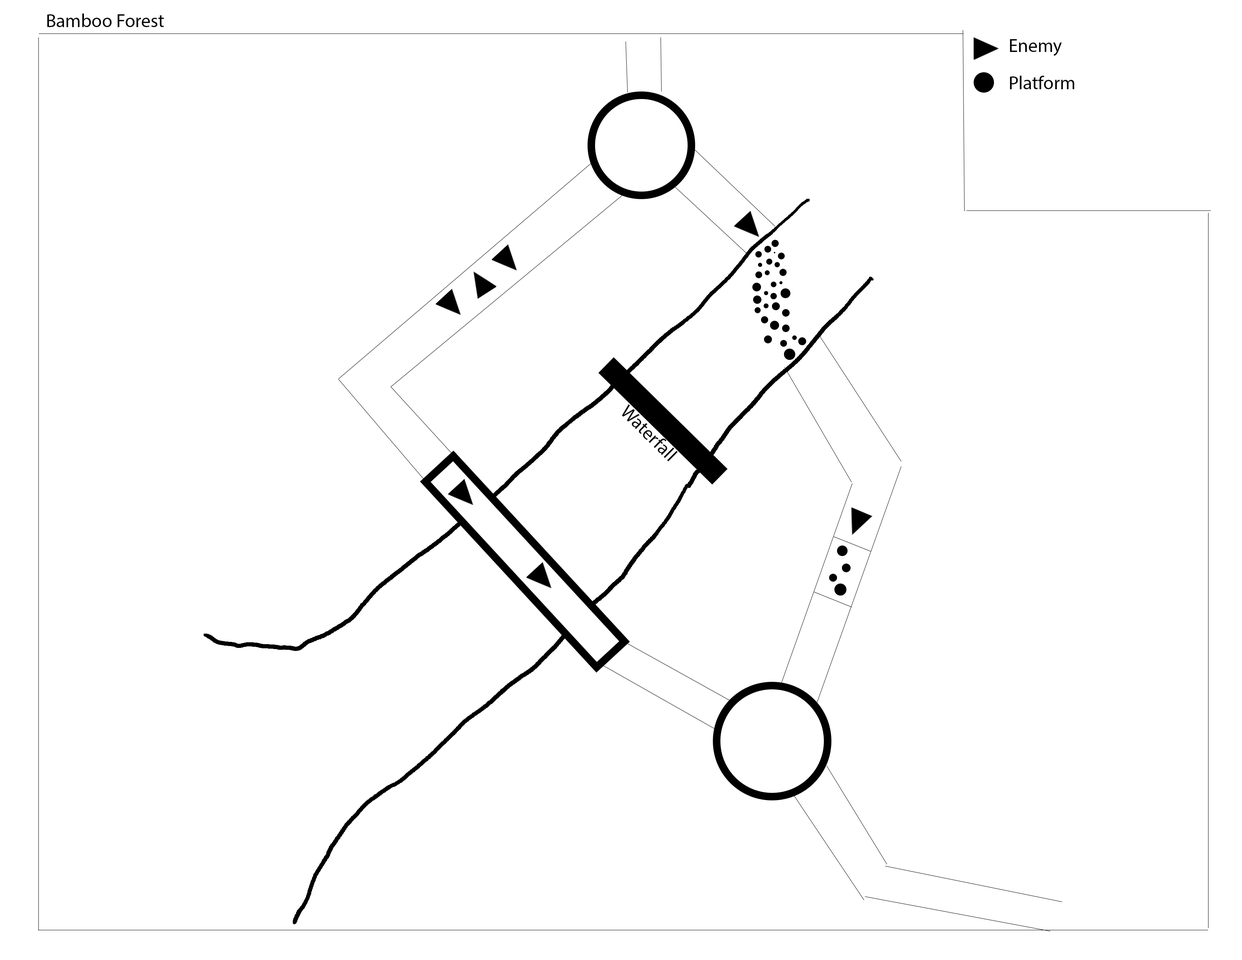
<style>
.page{position:relative;width:1242px;height:960px;background:#ffffff}
.page>*{position:absolute;margin:0}
.t1{font:18.8px "MyriadPro-Regular";color:#000000}
</style>
<div class="page">
<p class="t1" style="left:47px;top:14px;width:117px;height:13px">Bamboo Forest</p>
<p class="t1" style="left:1010px;top:39px;width:52px;height:17px">Enemy</p>
<p class="t1" style="left:1010px;top:76px;width:65px;height:13px">Platform</p>
</div>
